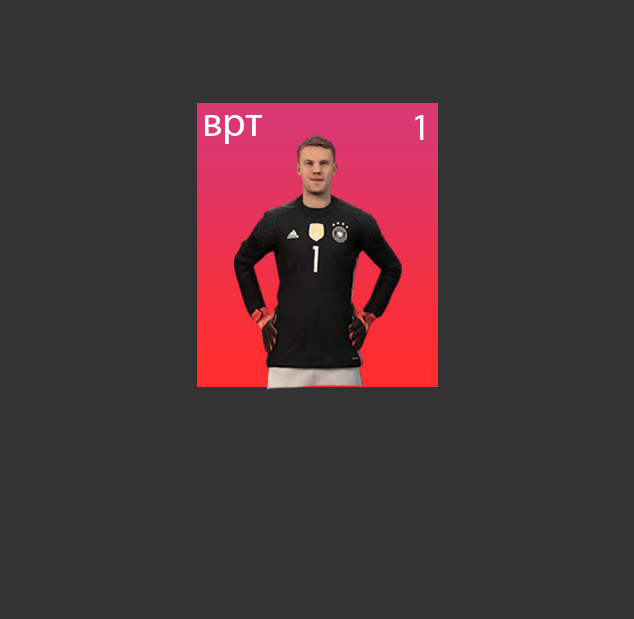
<style>
.page{position:relative;width:634px;height:619px;background:#333333}
.page>*{position:absolute;margin:0}
.t1{font:41.4px "MyriadPro-Regular";color:#ffffff}
.t2{font:37.8px "MyriadPro-Regular";color:#ffffff}
</style>
<div class="page">
<p class="t1" style="left:205px;top:115px;width:57px;height:29px">врт</p>
<p class="t2" style="left:415px;top:115px;width:9px;height:25px">1</p>
</div>
